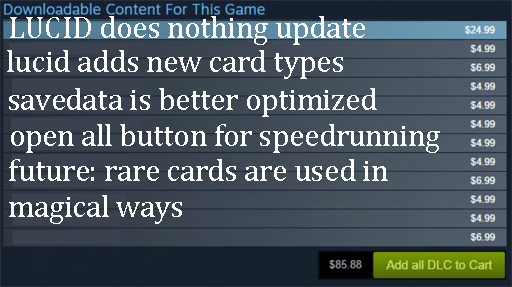
<style>
.page{position:relative;width:512px;height:287px}
.page>*{position:absolute;margin:0}
.t1{font:30.6px "CambriaMath";color:#ffffff}
</style>
<div class="page">
<p class="t1" style="left:10px;top:16px;width:355px;height:29px">LUCID does nothing update</p>
<p class="t1" style="left:7px;top:50px;width:336px;height:29px">lucid adds new card types</p>
<p class="t1" style="left:9px;top:88px;width:368px;height:29px">savedata is better optimized</p>
<p class="t1" style="left:11px;top:124px;width:429px;height:29px">open all button for speedrunning</p>
<p class="t1" style="left:9px;top:159px;width:379px;height:65px">future: rare cards are used in <br>magical ways</p>
</div>
